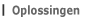
<style>
.page{position:relative;width:88px;height:21px;background:#ffffff}
.page>*{position:absolute;margin:0}
.t1{font:12px "Verdana-Bold";letter-spacing:0.01em;color:#333333}
.t2{font:12.1px "Verdana-Bold";color:#666666;scale:0.82 1}
</style>
<div class="page">
<p class="t1" style="left:2px;top:4px;width:3px;height:12px">|</p>
<p class="t2" style="left:12px;top:5px;width:68px;height:12px">Oplossingen</p>
</div>
